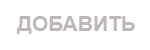
<style>
.page{position:relative;width:150px;height:50px;background:#ffffff}
.page>*{position:absolute;margin:0}
.t1{font:21px "Arial-BoldMT";color:#bdb7b7}
</style>
<div class="page">
<p class="t1" style="left:16px;top:16px;width:119px;height:18px">ДОБАВИТЬ</p>
</div>
